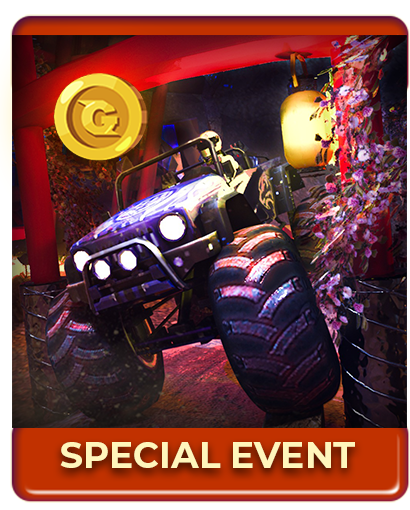
<style>
.page{position:relative;width:410px;height:510px}
.page>*{position:absolute;margin:0}
.t1{font:35.9px "Montserrat-Bold";color:#fff6bc;text-transform:uppercase}
</style>
<div class="page">
<p class="t1" style="left:60px;top:442px;width:295px;height:26px">special event</p>
</div>
